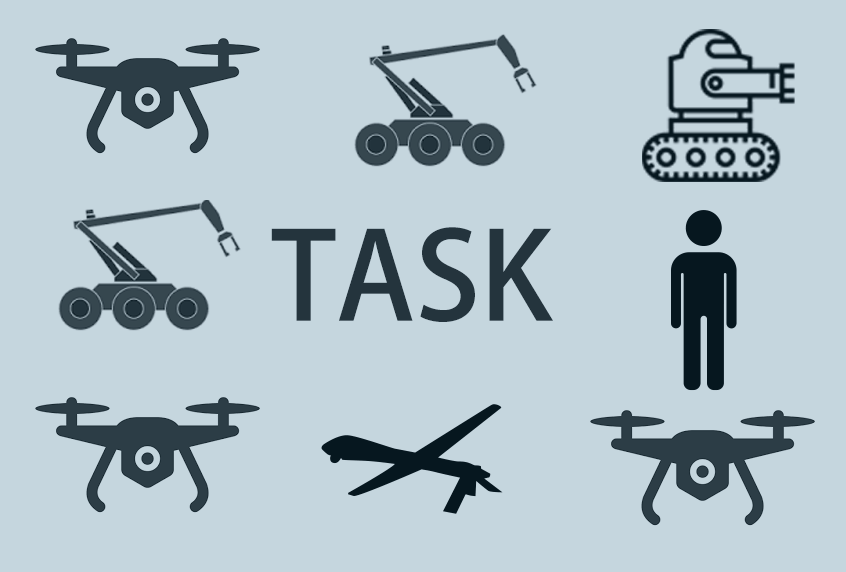
<style>
.page{position:relative;width:846px;height:572px;background:#c5d6de}
.page>*{position:absolute;margin:0}
.t1{font:120px "AdobeHeitiStd-Regular";color:#282728}
</style>
<div class="page">
<p class="t1" style="left:271px;top:227px;width:282px;height:95px">TASK</p>
</div>
